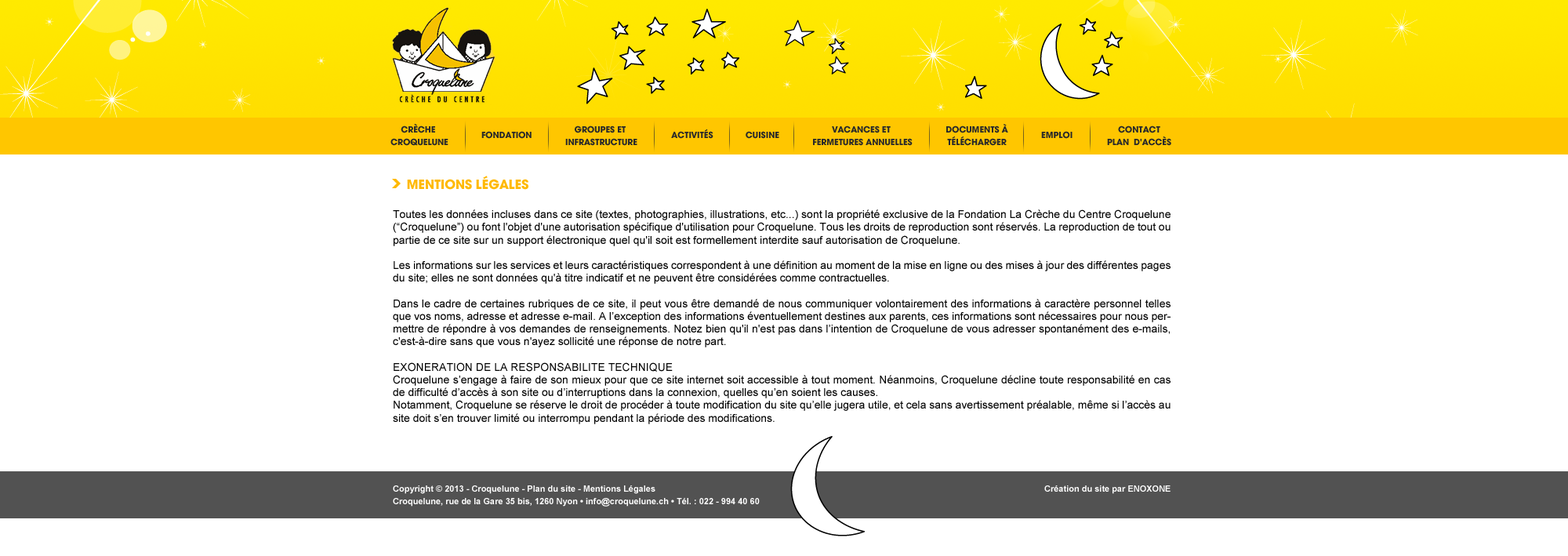
<style>
.page{position:relative;width:1568px;height:556px;background:#ffffff}
.page>*{position:absolute;margin:0}
.t1{font:9.4px/12.7px "AvantGard-Bold";color:#2a2a2a;text-transform:uppercase}
.t2{font:9.4px "AvantGard-Bold";color:#2a2a2a;text-transform:uppercase}
.t3{font:14.1px "AvantGard-Bold";color:#ffb900;text-transform:uppercase}
.t4{font:11px/12.7px "ArialMT";color:#000000}
.t5{font:8.6px/12.7px "Arial-BoldMT";color:#ffffff}
</style>
<div class="page">
<p class="t1" style="left:390px;top:123px;width:58px;height:23px;text-align:center">Crèche <br>Croquelune</p>
<p class="t1" style="left:565px;top:125px;width:72px;height:21px;text-align:center">Groupes et <br>infrastructure</p>
<p class="t1" style="left:813px;top:125px;width:100px;height:21px;text-align:center">Vacances et <br>fermetures annuelles</p>
<p class="t1" style="left:946px;top:124px;width:62px;height:22px;text-align:center">DOCUMENTs à<br>télécharger</p>
<p class="t1" style="left:1107px;top:125px;width:64px;height:21px;text-align:center">Contact<br>Plan  d'accès</p>
<p class="t2" style="left:481px;top:131px;width:51px;height:8px">Fondation</p>
<p class="t2" style="left:671px;top:129px;width:42px;height:10px">ACTIVITés</p>
<p class="t2" style="left:746px;top:131px;width:33px;height:8px">Cuisine</p>
<p class="t2" style="left:1041px;top:131px;width:32px;height:8px">Emploi</p>
<p class="t3" style="left:407px;top:176px;width:121px;height:14px">MENTIONS LÉGALES</p>
<p class="t4" style="left:393px;top:209px;width:778px;height:215px;text-align:justify">Toutes les données incluses dans ce site (textes, photographies, illustrations, etc...) sont la propriété exclusive de la Fondation La Crèche du Centre Croquelune (“Croquelune”) ou font l'objet d'une autorisation spécifique d'utilisation pour Croquelune. Tous les droits de reproduction sont réservés. La reproduction de tout ou partie de ce site sur un support électronique quel qu'il soit est formellement interdite sauf autorisation de Croquelune.<br><br>Les informations sur les services et leurs caractéristiques correspondent à une définition au moment de la mise en ligne ou des mises à jour des différentes pages du site; elles ne sont données qu'à titre indicatif et ne peuvent être considérées comme contractuelles. <br><br>Dans le cadre de certaines rubriques de ce site, il peut vous être demandé de nous communiquer volontairement des informations à caractère personnel telles que vos noms, adresse et adresse e-mail. A l’exception des informations éventuellement destines aux parents, ces informations sont nécessaires pour nous permettre de répondre à vos demandes de renseignements. Notez bien qu'il n'est pas dans l’intention de Croquelune de vous adresser spontanément des e-mails, c'est-à-dire sans que vous n'ayez sollicité une réponse de notre part.<br>  <br>EXONERATION DE LA RESPONSABILITE TECHNIQUE<br>Croquelune s’engage à faire de son mieux pour que ce site internet soit accessible à tout moment. Néanmoins, Croquelune décline toute responsabilité en cas de difficulté d’accès à son site ou d’interruptions dans la connexion, quelles qu’en soient les causes.<br>Notamment, Croquelune se réserve le droit de procéder à toute modification du site qu’elle jugera utile, et cela sans avertissement préalable, même si l’accès au site doit s’en trouver limité ou interrompu pendant la période des modifications.</p>
<p class="t5" style="left:393px;top:485px;width:778px;height:21px">Copyright © 2013 - Croquelune - Plan du site - Mentions Légales                                                             Création du site par ENOXONE<br>Croquelune, rue de la Gare 35 bis, 1260 Nyon • info@croquelune.ch • Tél. : 022 - 994 40 60</p>
</div>
